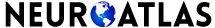
<style>
.page{position:relative;width:215px;height:28px;background:#ffffff}
.page>*{position:absolute;margin:0}
.t1{font:34px "LoveloBlack";color:#000000}
</style>
<div class="page">
<p class="t1" style="left:5px;top:1px;width:207px;height:26px">NEUR   ATLAS</p>
</div>
